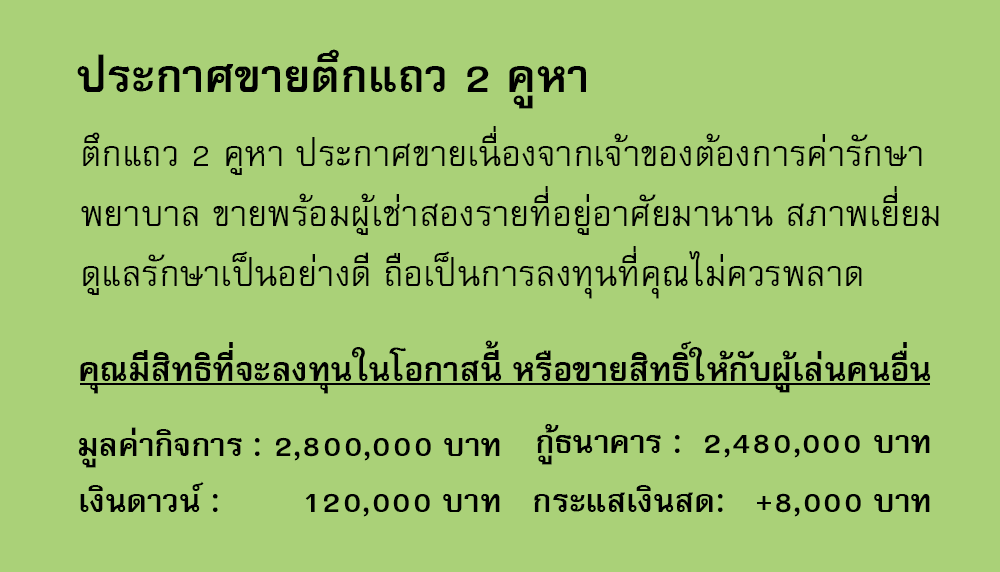
<style>
.page{position:relative;width:1000px;height:572px;background:#aad178}
.page>*{position:absolute;margin:0}
.t1{font:64px "FreesiaUPCBold";color:#000000}
.t2{font:50px/60px "FreesiaUPC";color:#000000}
.t3{font:47px "FreesiaUPCBold";color:#000000}
.t4{font:45px "FreesiaUPCBold";color:#000000}
</style>
<div class="page">
<p class="t1" style="left:77px;top:49px;width:509px;height:60px">ประกาศขายตึกแถว 2 คูหา</p>
<p class="t2" style="left:81px;top:126px;width:858px;height:173px">ตึกแถว 2 คูหา ประกาศขายเนื่องจากเจ้าของต้องการค่ารักษา<br>พยาบาล ขายพร้อมผู้เช่าสองรายที่อยู่อาศัยมานาน สภาพเยี่ยม<br>ดูแลรักษาเป็นอย่างดี ถือเป็นการลงทุนที่คุณไม่ควรพลาด</p>
<p class="t3" style="left:80px;top:340px;width:851px;height:54px">คุณมีสิทธิที่จะลงทุนในโอกาสนี้ หรือขายสิทธิ์ให้กับผู้เล่นคนอื่น</p>
<p class="t4" style="left:537px;top:424px;width:393px;height:41px">กู้ธนาคาร :  2,480,000 บาท</p>
<p class="t4" style="left:78px;top:427px;width:422px;height:41px">มูลค่ากิจการ : 2,800,000 บาท</p>
<p class="t4" style="left:80px;top:481px;width:420px;height:36px">เงินดาวน์ :        120,000 บาท</p>
<p class="t4" style="left:534px;top:485px;width:396px;height:32px">กระแสเงินสด:   +8,000 บาท</p>
</div>
